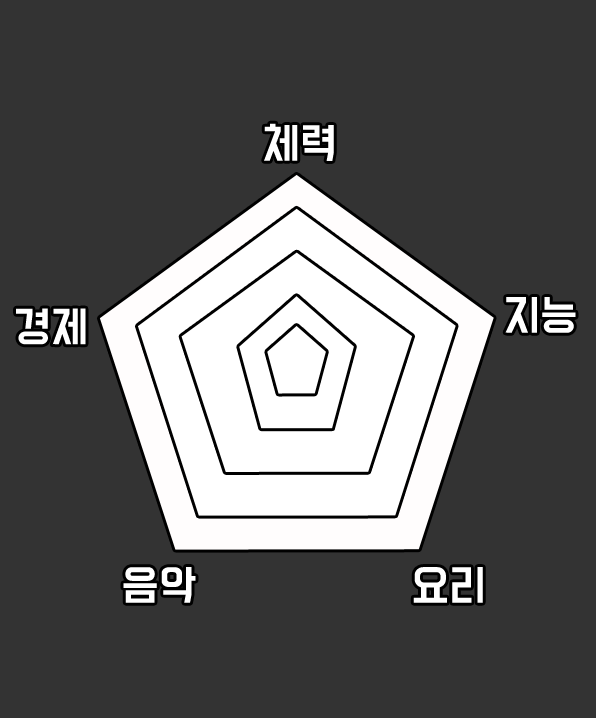
<style>
.page{position:relative;width:596px;height:718px;background:#333333}
.page>*{position:absolute;margin:0}
.t1{font:37.9px "BMDoHyeon";color:#ffffff}
</style>
<div class="page">
<p class="t1" style="left:264px;top:123px;width:70px;height:38px">체력</p>
<p class="t1" style="left:505px;top:297px;width:71px;height:36px">지능</p>
<p class="t1" style="left:16px;top:308px;width:70px;height:37px">경제</p>
<p class="t1" style="left:123px;top:567px;width:73px;height:36px">음악</p>
<p class="t1" style="left:413px;top:567px;width:70px;height:36px">요리</p>
</div>
